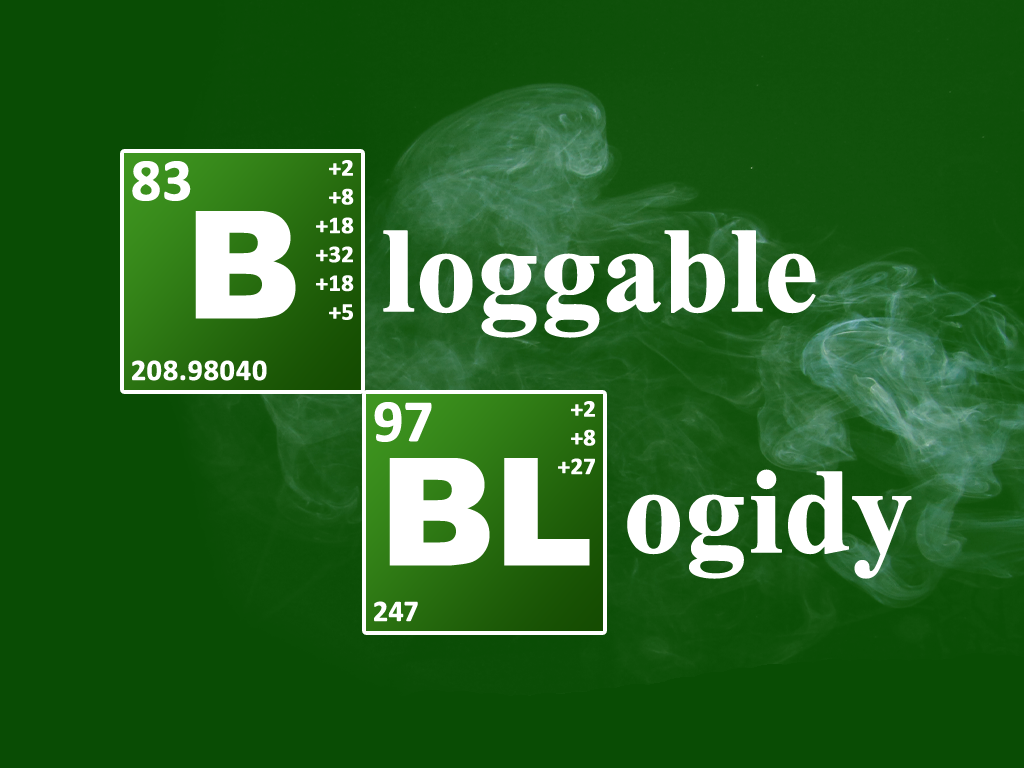
<style>
.page{position:relative;width:1024px;height:768px;background:#094c04}
.page>*{position:absolute;margin:0}
.t1{font:30px "Calibri-Bold";color:#ffffff;font-weight:bold}
.t2{font:60px "Calibri-Bold";color:#ffffff;font-weight:bold}
.t3{font:24px "Calibri-Bold";color:#ffffff;font-weight:bold}
.t4{font:150px "Arial-Black";color:#ffffff}
.t5{font:150px "Aparajita-Bold";color:#ffffff;font-weight:bold}
</style>
<div class="page">
<p class="t1" style="left:132px;top:161px;width:135px;height:220px"><span class="t2">83<br></span><br><br><br><br>208.98040</p>
<p class="t3" style="left:316px;top:160px;width:38px;height:160px;text-align:right">+2<br>+8<br>+18<br>+32<br>+18<br>+5</p>
<p class="t4" style="left:195px;top:211px;width:101px;height:108px">B</p>
<p class="t5" style="left:383px;top:230px;width:433px;height:108px">loggable</p>
<p class="t3" style="left:558px;top:401px;width:38px;height:74px;text-align:right">+2<br>+8<br>+27</p>
<p class="t1" style="left:374px;top:402px;width:58px;height:220px"><span class="t2">97<br></span><br><br><br><br>247</p>
<p class="t4" style="left:389px;top:458px;width:201px;height:108px">BL</p>
<p class="t5" style="left:627px;top:469px;width:285px;height:110px">ogidy</p>
</div>
